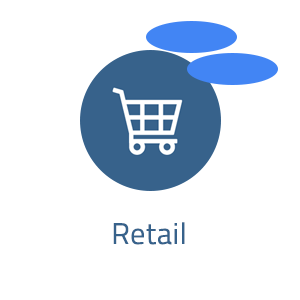
<style>
.page{position:relative;width:300px;height:300px;background:#ffffff}
.page>*{position:absolute;margin:0}
.t1{font:30px "Titillium-Regular";letter-spacing:0.02em;color:#37628b}
</style>
<div class="page">
<p class="t1" style="left:113px;top:222px;width:72px;height:23px">Retail</p>
</div>
